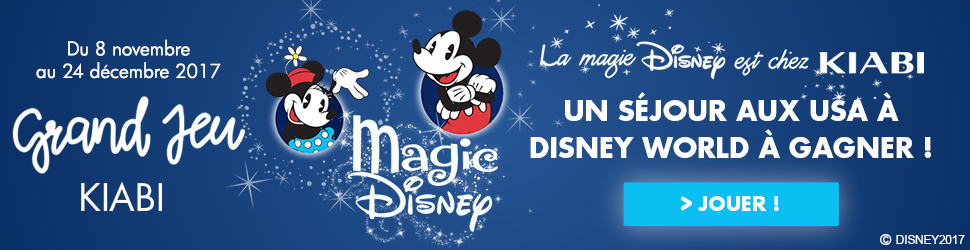
<style>
.page{position:relative;width:970px;height:250px}
.page>*{position:absolute;margin:0}
.t1{font:18.7px "Futura-Book";color:#ffffff}
.t2{font:27.9px/36.9px "FuturaStd-Bold";color:#ffffff;text-transform:uppercase}
.t3{font:36.7px "FuturaLTPro-Book";color:#ffffff;text-transform:uppercase}
.t4{font:25.8px "FuturaStd-Medium";color:#f9fef8;text-transform:uppercase;scale:0.66 1}
.t5{font:19.9px "FuturaStd-Bold";color:#f9fef8;text-transform:uppercase}
.t6{font:14.7px "FuturaStd-Bold";color:#ffffff;text-transform:uppercase}
.t7{font:11.7px "ArialMT";color:#ffffff;text-transform:uppercase}
</style>
<div class="page">
<p class="t1" style="left:36px;top:39px;width:185px;height:40px;text-align:center">Du 8 novembre<br>au 24 décembre 2017</p>
<p class="t2" style="left:530px;top:92px;width:401px;height:66px;text-align:center">un séjour aux USA à<br>Disney World À GAGNER !</p>
<p class="t3" style="left:81px;top:182px;width:81px;height:29px">kiabi</p>
<p class="t4" style="left:682px;top:197px;width:9px;height:13px">&gt;</p>
<p class="t5" style="left:698px;top:196px;width:81px;height:15px">JOUER !</p>
<p class="t6" style="left:880px;top:234px;width:12px;height:11px">©</p>
<p class="t7" style="left:896px;top:235px;width:69px;height:9px">Disney2017</p>
</div>
